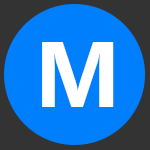
<style>
.page{position:relative;width:150px;height:150px;background:#007ffd}
.page>*{position:absolute;margin:0}
.t1{font:92.6px "SegoeUI-Bold";color:#ffffff;scale:0.96 1}
</style>
<div class="page">
<p class="t1" style="left:42px;top:42px;width:72px;height:65px">M</p>
</div>
